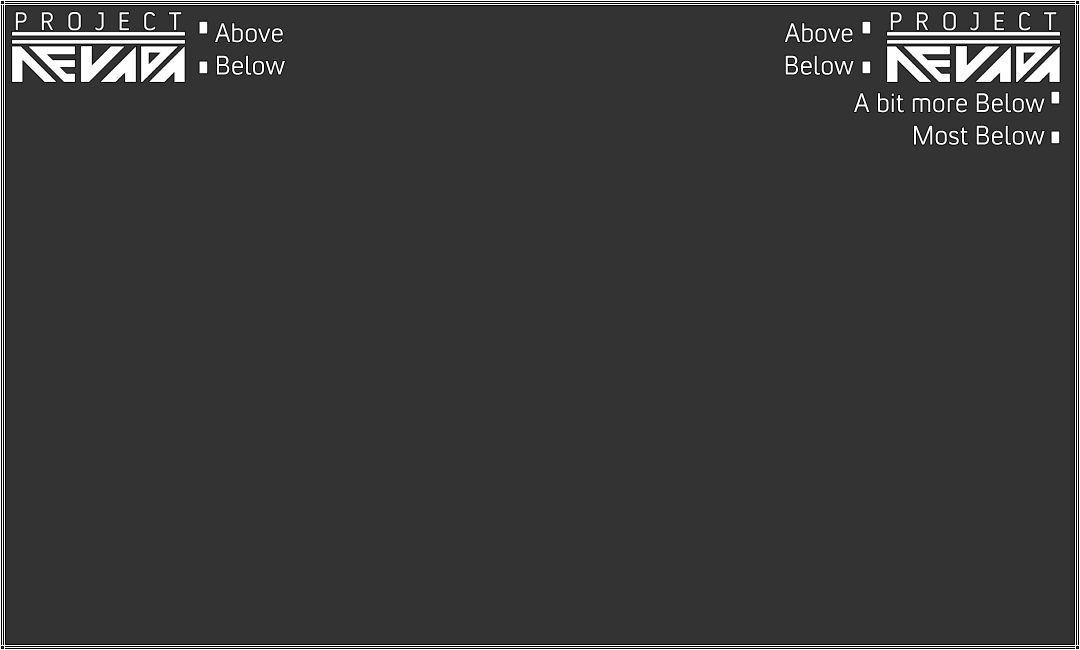
<style>
.page{position:relative;width:1080px;height:650px;background:#333333}
.page>*{position:absolute;margin:0}
.t1{font:100px "ConvectionRegular";color:#ffffff}
.t2{font:27px "ConvectionRegular";color:#ffffff}
</style>
<div class="page">
<p class="t1" style="left:199px;top:21px;width:9px;height:53px">:</p>
<p class="t2" style="left:215px;top:23px;width:70px;height:52px">Above<br>Below</p>
<p class="t2" style="left:784px;top:23px;width:70px;height:52px;text-align:right">Above<br>Below</p>
<p class="t1" style="left:862px;top:21px;width:9px;height:53px">:</p>
<p class="t2" style="left:854px;top:93px;width:191px;height:52px;text-align:right">A bit more Below<br>Most Below</p>
<p class="t1" style="left:1051px;top:91px;width:9px;height:53px">:</p>
</div>
